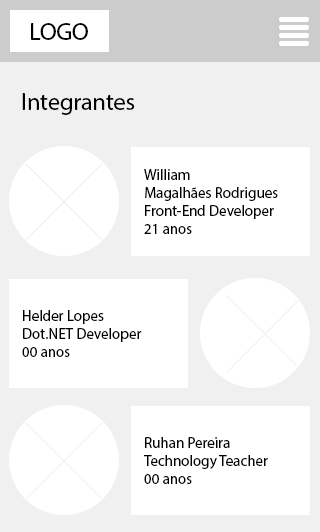
<style>
.page{position:relative;width:320px;height:532px;background:#ffffff}
.page>*{position:absolute;margin:0}
.t1{font:12px "MyriadPro-Regular";color:#000000}
.t2{font:24px "MyriadPro-Regular";color:#000000}
.t3{font:15px "MyriadPro-Regular";color:#000000}
</style>
<div class="page">
<p class="t1" style="left:31px;top:23px;width:57px;height:17px">LOGO</p>
<p class="t2" style="left:22px;top:93px;width:113px;height:22px">Integrantes</p>
<p class="t3" style="left:144px;top:169px;width:134px;height:65px">William<br>Magalhães Rodrigues<br>Front-End Developer<br>21 anos</p>
<p class="t3" style="left:22px;top:310px;width:120px;height:47px">Helder Lopes<br>Dot.NET Developer<br>00 anos</p>
<p class="t3" style="left:144px;top:437px;width:124px;height:47px">Ruhan Pereira<br>Technology Teacher<br>00 anos</p>
</div>
